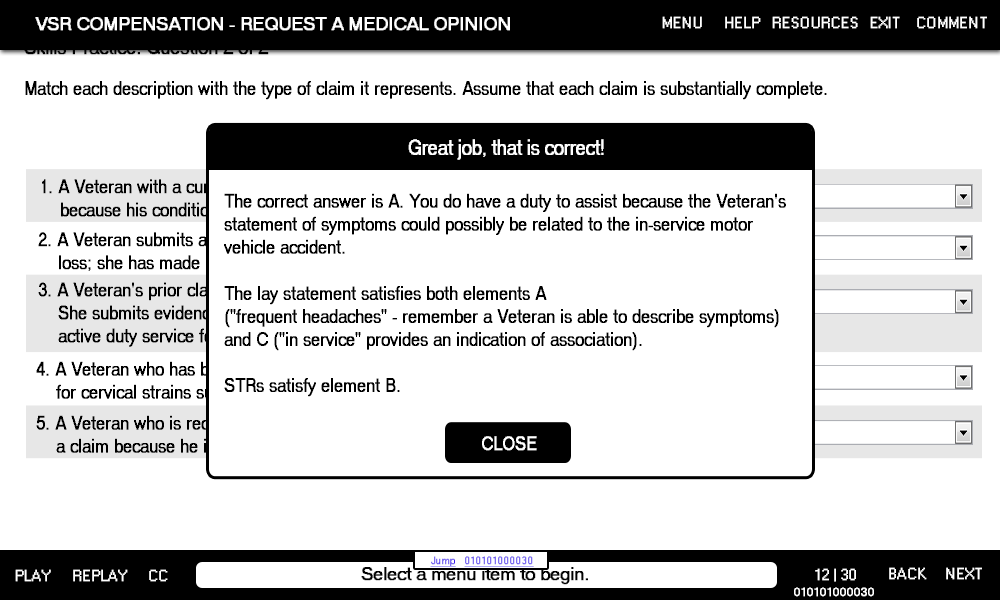
<style>
.page{position:relative;width:1000px;height:600px;background:#ffffff}
.page>*{position:absolute;margin:0}
.t1{font:18px "MS Sans Serif";color:#ffffff;font-weight:bold}
.t2{font:14px "MS Sans Serif";color:#ffffff;font-weight:bold}
.t3{font:19.2px "MS Sans Serif";color:#000000;font-weight:bold;scale:0.83 1}
.t4{font:21.6px "MS Sans Serif";color:#ffffff;font-weight:bold;scale:0.83 1}
.t5{font:19.2px "MS Sans Serif";font-weight:bold;scale:0.83 1}
.t6{font:19.2px "MS Sans Serif";color:#ffffff;font-weight:bold;scale:0.83 1}
.t7{font:10px "MS Sans Serif";color:#3b18ec;font-weight:bold;text-decoration:underline}
.t8{font:18px "MS Sans Serif";color:#010101;font-weight:bold}
.t9{font:12px "MS Sans Serif";color:#ffffff;font-weight:bold}
</style>
<div class="page">
<p class="t1" style="left:35px;top:17px;width:475px;height:14px">VSR COMPENSATION - REQUEST A MEDICAL OPINION</p>
<p class="t2" style="left:662px;top:16px;width:40px;height:13px">MENU</p>
<p class="t2" style="left:725px;top:16px;width:36px;height:13px">HELP</p>
<p class="t2" style="left:772px;top:16px;width:86px;height:13px">RESOURCES</p>
<p class="t2" style="left:870px;top:16px;width:30px;height:13px">EXIT</p>
<p class="t2" style="left:917px;top:16px;width:70px;height:13px">COMMENT</p>
<p class="t3" style="left:25px;top:81px;width:802px;height:19px">Match each description with the type of claim it represents. Assume that each claim is substantially complete.</p>
<p class="t4" style="left:408px;top:139px;width:196px;height:21px">Great job, that is correct!</p>
<p class="t3" style="left:224px;top:193px;width:562px;height:204px">The correct answer is A. You do have a duty to assist because the Veteran's<br>statement of symptoms could possibly be related to the in-service motor <br>vehicle accident. <br><br>The lay statement satisfies both elements A <br>("frequent headaches" - remember a Veteran is able to describe symptoms)<br>and C ("in service" provides an indication of association). <br><br>STRs satisfy element B.</p>
<p class="t5" style="left:38px;top:232px;width:636px;height:41px">2. A Veteran submits a claim for service-connected disability compensation for hearing<br>    loss; she has made no prior claims.</p>
<p class="t6" style="left:482px;top:436px;width:55px;height:15px">CLOSE</p>
<p class="t7" style="left:430px;top:556px;width:104px;height:11px">Jump   010101000030</p>
<p class="t2" style="left:15px;top:569px;width:36px;height:13px">PLAY</p>
<p class="t2" style="left:73px;top:569px;width:55px;height:13px">REPLAY</p>
<p class="t2" style="left:149px;top:569px;width:19px;height:13px">CC</p>
<p class="t8" style="left:361px;top:567px;width:227px;height:18px">Select a menu item to begin.</p>
<p class="t2" style="left:815px;top:568px;width:41px;height:14px">12 | 30</p>
<p class="t2" style="left:889px;top:567px;width:38px;height:13px">BACK</p>
<p class="t2" style="left:946px;top:567px;width:36px;height:13px">NEXT</p>
<p class="t9" style="left:794px;top:587px;width:80px;height:10px">010101000030</p>
</div>
